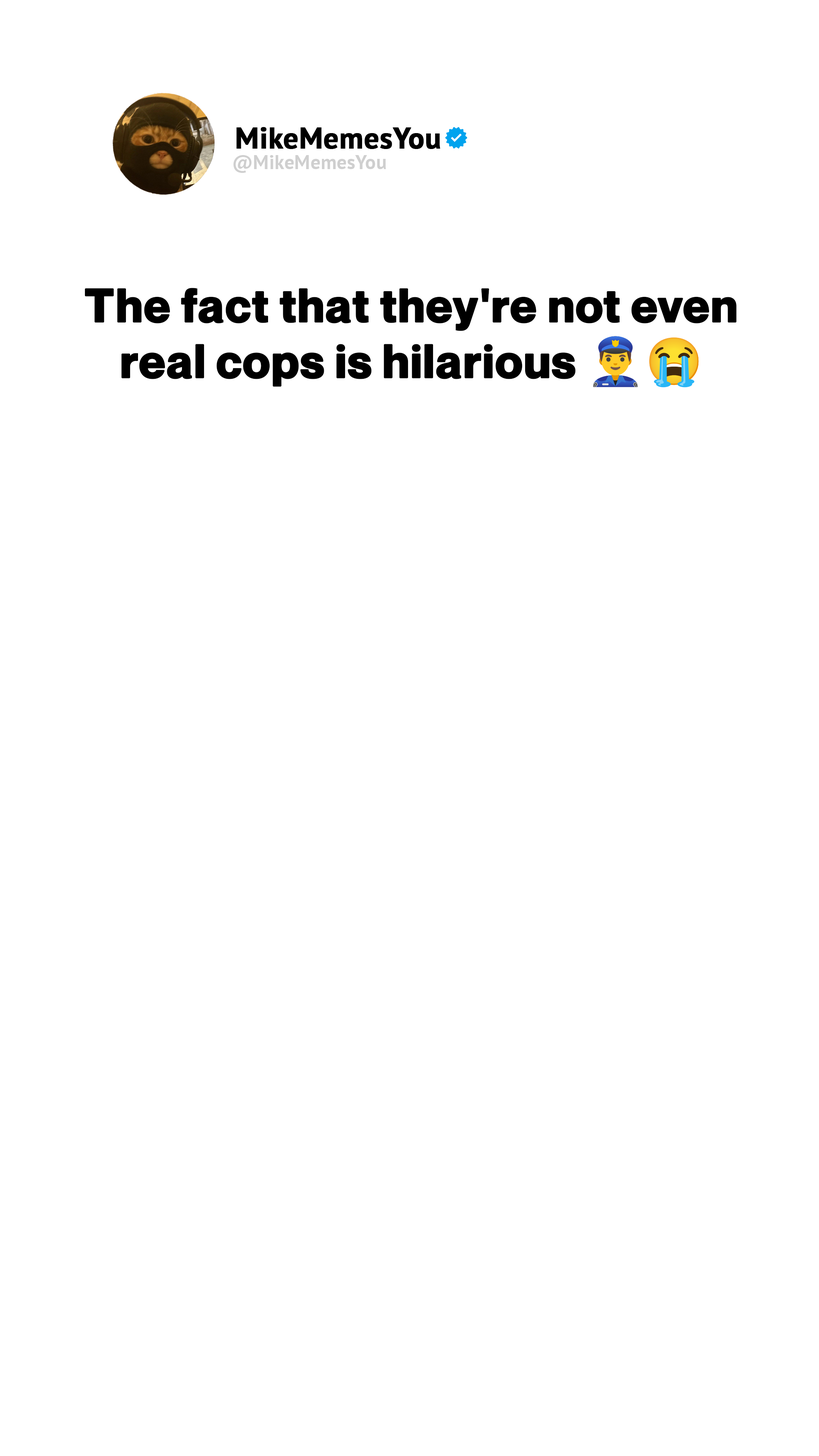
<style>
.page{position:relative;width:819px;height:1456px;background:#ffffff}
.page>*{position:absolute;margin:0}
.t1{font:29.6px "PTSans-Bold";color:#000000;font-weight:bold}
.t2{font:19.7px "PTSans-Bold";letter-spacing:0.01em;color:#cfcfcf}
.t3{font:46.3px "NeueMontreal-Bold";letter-spacing:0.01em;color:#000000;font-weight:bold}
.t4{font:46.3px "NotoColorEmoji-SVG";letter-spacing:0.01em;color:#000000;font-weight:bold}
</style>
<div class="page">
<p class="t1" style="left:236px;top:127px;width:204px;height:22px">MikeMemesYou</p>
<p class="t2" style="left:233px;top:155px;width:153px;height:18px">@MikeMemesYou</p>
<p class="t3" style="left:85px;top:288px;width:652px;height:100px;text-align:center">The fact that they're not even<br>real cops is hilarious <span class="t4">👮‍♂️😭</span></p>
</div>
